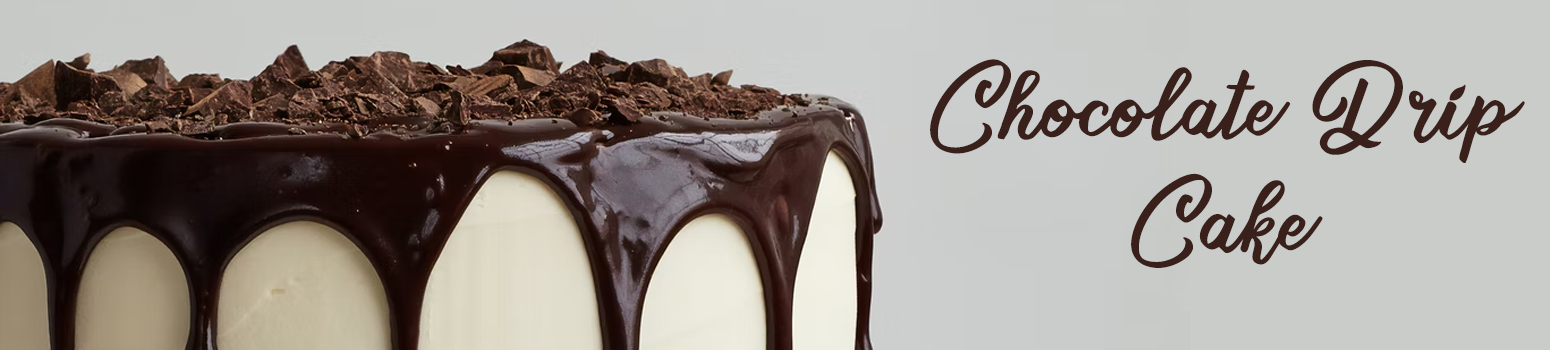
<style>
.page{position:relative;width:1550px;height:350px;background:#caccc9}
.page>*{position:absolute;margin:0}
.t1{font:98.6px/114.5px "SweetsDelightDEMO";letter-spacing:-0.02em;color:#3a201b;font-weight:bold}
</style>
<div class="page">
<p class="t1" style="left:930px;top:59px;width:595px;height:209px;text-align:center">Chocolate Drip<br>Cake</p>
</div>
